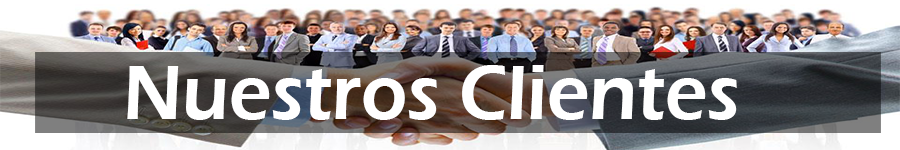
<style>
.page{position:relative;width:900px;height:150px}
.page>*{position:absolute;margin:0}
.t1{font:80px "ErasITC-Demi";color:#ffffff;scale:0.94 1}
</style>
<div class="page">
<p class="t1" style="left:127px;top:65px;width:610px;height:55px">Nuestros Clientes</p>
</div>
